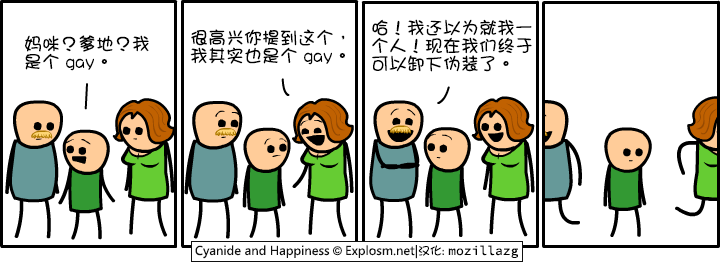
<style>
.page{position:relative;width:721px;height:262px;background:#ffffff}
.page>*{position:absolute;margin:0}
.t1{font:18px/18px "DFGirl";color:#000000}
</style>
<div class="page">
<p class="t1" style="left:190px;top:29px;width:155px;height:36px">很高兴你提到这个，<br>我其实也是个 gay。</p>
<p class="t1" style="left:372px;top:19px;width:160px;height:53px">哈！我还以为就我一<br>个人！现在我们终于<br>可以卸下伪装了。</p>
<p class="t1" style="left:25px;top:35px;width:124px;height:36px">妈咪？爹地？我<br>是个 gay。</p>
</div>
